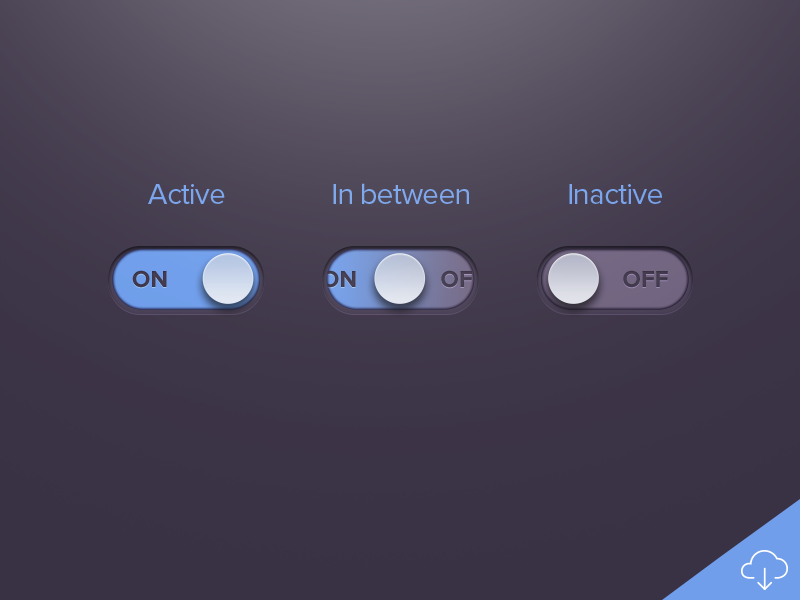
<style>
.page{position:relative;width:800px;height:600px}
.page>*{position:absolute;margin:0}
.t1{font:30px "ProximaNova-Regular";letter-spacing:-0.025em;color:#7ca6ed}
.t2{font:30px "ProximaNova-Regular";letter-spacing:-0.025em;color:#7fa8ed}
.t3{font:30px "ProximaNova-Regular";letter-spacing:-0.025em;color:#7aa5ed}
.t4{font:24px "ProximaNova-Bold";color:#3e3649}
.t5{font:24px "ProximaNova-Bold";color:#41394c}
</style>
<div class="page">
<p class="t1" style="left:148px;top:184px;width:77px;height:20px">Active</p>
<p class="t2" style="left:333px;top:183px;width:136px;height:21px">In between</p>
<p class="t3" style="left:569px;top:184px;width:93px;height:20px">Inactive</p>
<p class="t4" style="left:132px;top:270px;width:35px;height:18px">ON</p>
<p class="t5" style="left:623px;top:270px;width:45px;height:18px">OFF</p>
</div>
